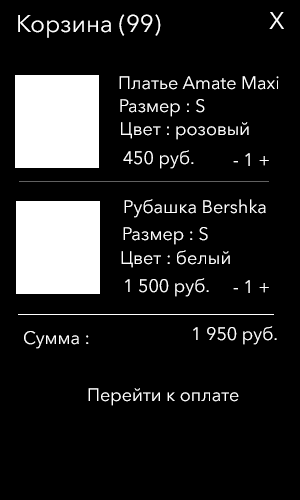
<style>
.page{position:relative;width:300px;height:500px;background:#000000}
.page>*{position:absolute;margin:0}
.t1{font:24px "AvenirNextCyr-Regular";color:#ffffff}
.t2{font:18px "AvenirNextCyr-Regular";color:#ffffff}
</style>
<div class="page">
<p class="t1" style="left:18px;top:14px;width:143px;height:24px">Корзина (99)</p>
<p class="t1" style="left:269px;top:12px;width:15px;height:17px">X</p>
<p class="t2" style="left:119px;top:76px;width:160px;height:14px">Платье Amate Maxi</p>
<p class="t2" style="left:120px;top:99px;width:85px;height:18px">Размер : S</p>
<p class="t2" style="left:121px;top:122px;width:128px;height:18px">Цвет : розовый</p>
<p class="t2" style="left:123px;top:150px;width:71px;height:19px">450 руб.</p>
<p class="t2" style="left:233px;top:153px;width:36px;height:13px">- 1 +</p>
<p class="t2" style="left:124px;top:199px;width:142px;height:19px">Рубашка Bershka</p>
<p class="t2" style="left:123px;top:227px;width:85px;height:18px">Размер : S</p>
<p class="t2" style="left:121px;top:250px;width:109px;height:18px">Цвет : белый</p>
<p class="t2" style="left:125px;top:278px;width:84px;height:19px">1 500 руб.</p>
<p class="t2" style="left:233px;top:280px;width:36px;height:13px">- 1 +</p>
<p class="t2" style="left:193px;top:326px;width:84px;height:19px">1 950 руб.</p>
<p class="t2" style="left:24px;top:331px;width:65px;height:18px">Сумма :</p>
<p class="t2" style="left:88px;top:388px;width:151px;height:18px">Перейти к оплате</p>
</div>
